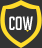
<style>
.page{position:relative;width:42px;height:48px;background:#333333}
.page>*{position:absolute;margin:0}
.t1{font:32px "BigNoodleTitling";letter-spacing:-0.01em;color:#ffffff}
</style>
<div class="page">
<p class="t1" style="left:9px;top:16px;width:24px;height:14px">COW</p>
</div>
